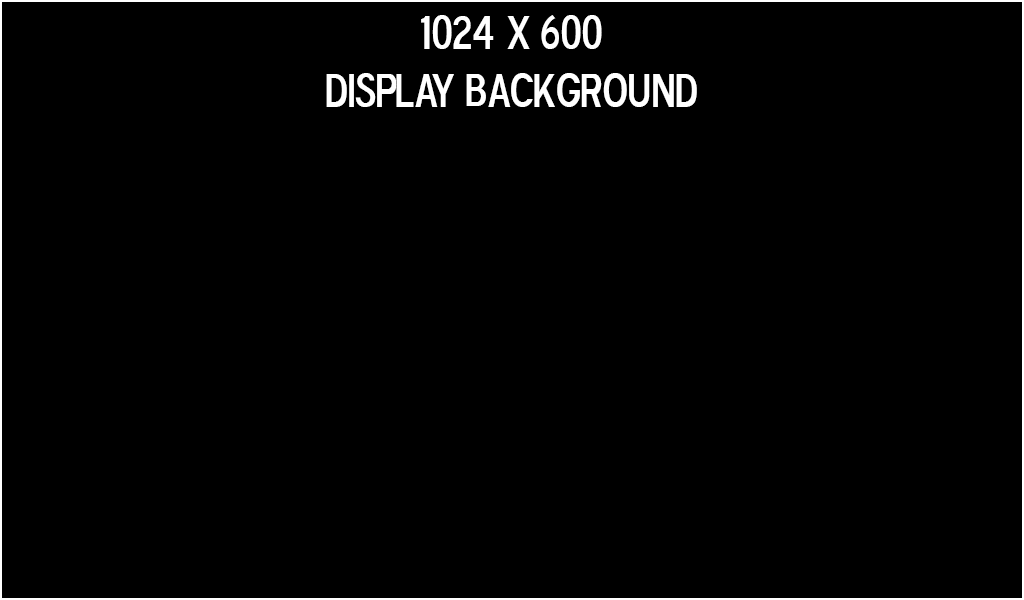
<style>
.page{position:relative;width:1024px;height:600px;background:#000000}
.page>*{position:absolute;margin:0}
.t1{font:48px "BlueHighwayDType";color:#ffffff}
</style>
<div class="page">
<p class="t1" style="left:326px;top:15px;width:371px;height:92px;text-align:center">1024 x 600<br>DISPLAY BACKGROUND</p>
</div>
